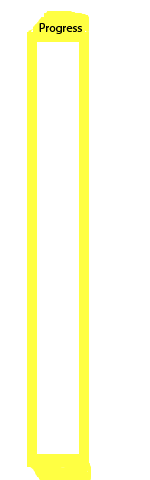
<style>
.page{position:relative;width:150px;height:480px;background:#ffffff}
.page>*{position:absolute;margin:0}
.t1{font:12px "MyriadPro-Regular";color:#000000}
</style>
<div class="page">
<p class="t1" style="left:39px;top:23px;width:43px;height:11px">Progress</p>
</div>
